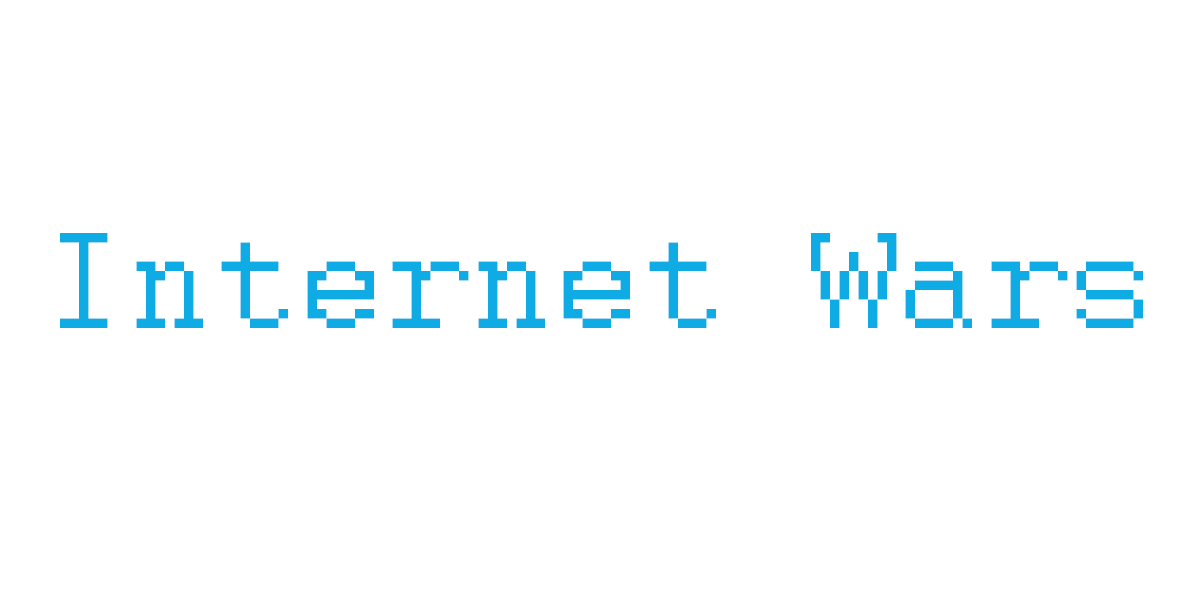
<style>
.page{position:relative;width:1200px;height:600px;background:#ffffff}
.page>*{position:absolute;margin:0}
.t1{font:152px "Courier";color:#0eabe5}
</style>
<div class="page">
<p class="t1" style="left:60px;top:233px;width:1083px;height:95px">Internet Wars</p>
</div>
